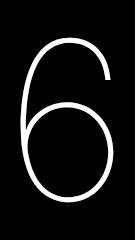
<style>
.page{position:relative;width:135px;height:240px;background:#000000}
.page>*{position:absolute;margin:0}
.t1{font:220px "Inter-Thin";color:#ffffff}
</style>
<div class="page">
<p class="t1" style="left:20px;top:37px;width:94px;height:166px">6</p>
</div>
